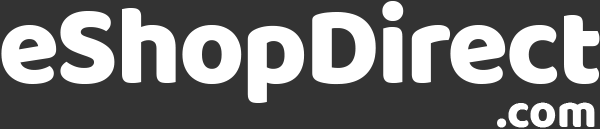
<style>
.page{position:relative;width:600px;height:129px;background:#333333}
.page>*{position:absolute;margin:0}
.t1{font:113.3px "BalooTamma-Regular";letter-spacing:-0.025em;color:#ffffff}
.t2{font:47.3px "BalooTamma-Regular";color:#ffffff}
</style>
<div class="page">
<p class="t1" style="left:1px;top:1px;width:599px;height:102px">eShopDirect</p>
<p class="t2" style="left:497px;top:102px;width:98px;height:26px">.com</p>
</div>
